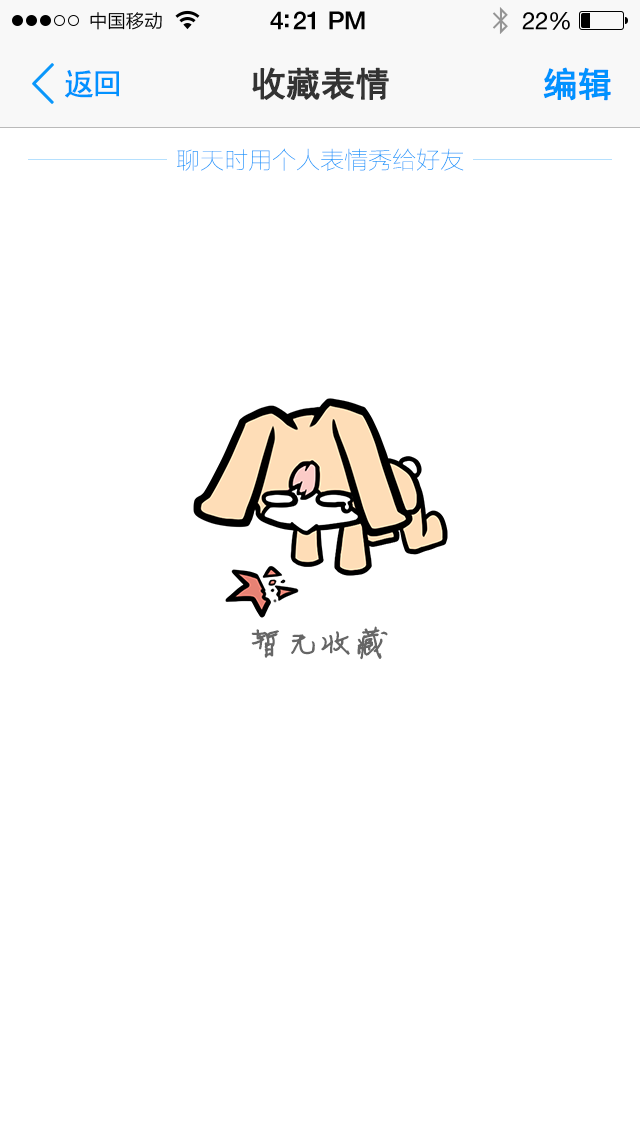
<style>
.page{position:relative;width:640px;height:1136px;background:#ffffff}
.page>*{position:absolute;margin:0}
.t1{font:30px "SimHei";letter-spacing:-0.075em;color:#0192ff;font-weight:bold}
.t2{font:34px "SimHei";letter-spacing:-0.01em;color:#333333;font-weight:bold}
.t3{font:34px "SimHei";letter-spacing:-0.01em;color:#0192ff;font-weight:bold}
.t4{font:24px "FZLTCXHJW--GB1-0";color:#0a97fb}
.t5{font:34px "FZJLJW--GB1-0";color:#666666;font-weight:bold}
</style>
<div class="page">
<p class="t1" style="left:65px;top:70px;width:54px;height:28px">返回</p>
<p class="t2" style="left:252px;top:67px;width:137px;height:33px">收藏表情</p>
<p class="t3" style="left:543px;top:67px;width:68px;height:34px">编辑</p>
<p class="t4" style="left:177px;top:148px;width:287px;height:23px">聊天时用个人表情秀给好友</p>
<p class="t5" style="left:251px;top:626px;width:137px;height:34px">暂无收藏</p>
</div>
